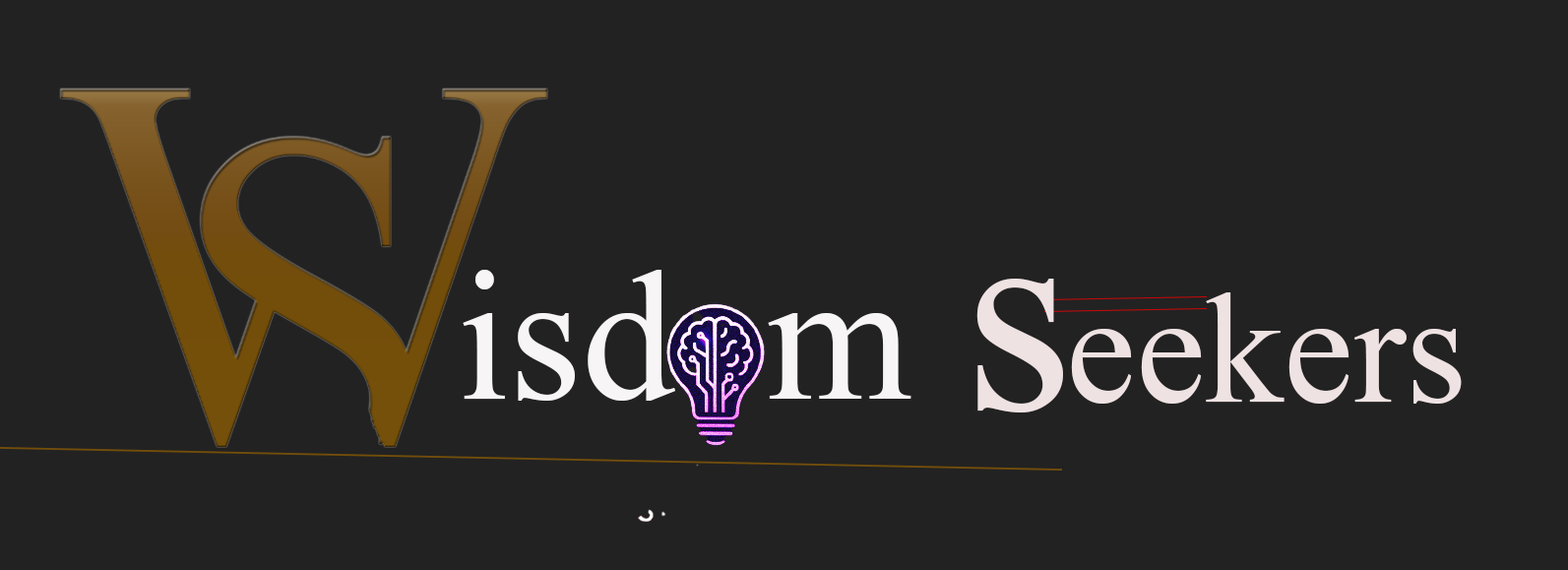
<style>
.page{position:relative;width:1568px;height:570px;background:#222222}
.page>*{position:absolute;margin:0}
.t1{font:185.1px "TimesNewRomanPSMT";color:#f7f5f5}
.t2{font:281.2px "TimesNewRomanPSMT";color:#efe2e2}
.t3{font:156.6px "TimesNewRomanPSMT";color:#efe2e2}
</style>
<div class="page">
<p class="t1" style="left:463px;top:270px;width:448px;height:131px">isd  m</p>
<p class="t2" style="left:976px;top:279px;width:87px;height:133px">s</p>
<p class="t3" style="left:1071px;top:292px;width:391px;height:112px">eekers</p>
</div>
